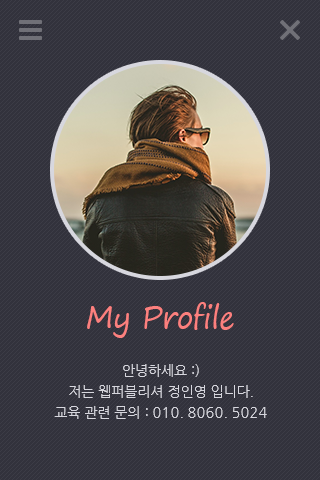
<style>
.page{position:relative;width:320px;height:480px;background:#32323c}
.page>*{position:absolute;margin:0}
.t1{font:30px "SegoePrint";letter-spacing:-0.025em;color:#fc807e}
.t2{font:14px "NanumGothic";color:#d7d7de}
</style>
<div class="page">
<p class="t1" style="left:87px;top:302px;width:147px;height:36px">My Profile</p>
<p class="t2" style="left:54px;top:364px;width:213px;height:55px;text-align:center">안녕하세요 :)<br>저는 웹퍼블리셔 정인영 입니다.<br>교육 관련 문의 : 010. 8060. 5024</p>
</div>
